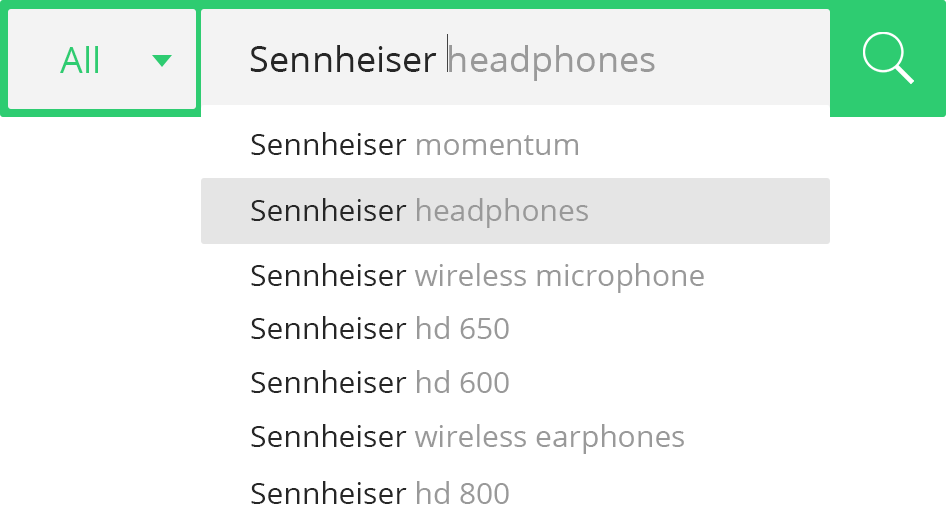
<style>
.page{position:relative;width:946px;height:531px;background:#ffffff}
.page>*{position:absolute;margin:0}
.t1{font:36px "OpenSans";color:#2ecc71}
.t2{font:36px "OpenSans";color:#262626}
.t3{font:36px "OpenSans";color:#999999}
.t4{font:30px "OpenSans";color:#262626}
.t5{font:30px "OpenSans";color:#999999}
</style>
<div class="page">
<p class="t1" style="left:60px;top:46px;width:38px;height:27px">All</p>
<p class="t2" style="left:250px;top:45px;width:405px;height:36px">Sennheiser <span class="t3">headphones</span></p>
<p class="t4" style="left:251px;top:132px;width:327px;height:23px">Sennheiser <span class="t5">momentum</span></p>
<p class="t4" style="left:251px;top:198px;width:337px;height:30px">Sennheiser <span class="t5">headphones</span></p>
<p class="t5" style="left:251px;top:263px;width:453px;height:30px"><span class="t4">Sennheiser </span>wireless microphone</p>
<p class="t4" style="left:251px;top:316px;width:258px;height:23px">Sennheiser <span class="t5">hd 650</span></p>
<p class="t4" style="left:251px;top:370px;width:258px;height:23px">Sennheiser <span class="t5">hd 600</span></p>
<p class="t5" style="left:251px;top:424px;width:433px;height:30px"><span class="t4">Sennheiser </span>wireless earphones</p>
<p class="t4" style="left:251px;top:481px;width:258px;height:23px">Sennheiser <span class="t5">hd 800</span></p>
</div>
